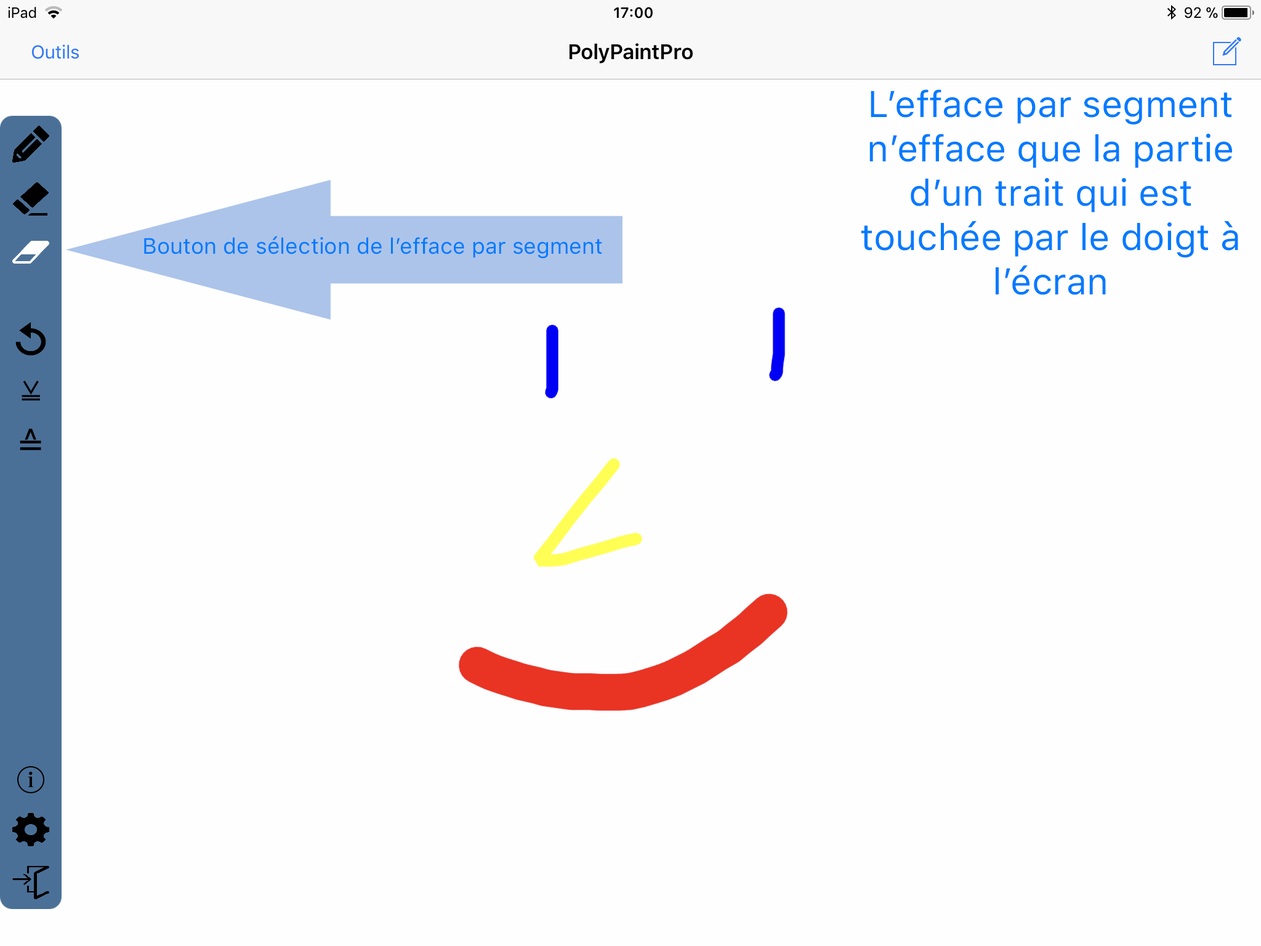
<style>
.page{position:relative;width:1261px;height:946px;background:#fffeff}
.page>*{position:absolute;margin:0}
.t1{font:36.9px "SFProText-Regular";color:#007aff}
.t2{font:22.2px "SFProText-Regular";color:#007aff}
</style>
<div class="page">
<p class="t1" style="left:861px;top:89px;width:377px;height:206px;text-align:center">L’efface par segment n’efface que la partie d’un trait qui est touchée par le doigt à l’écran</p>
<p class="t2" style="left:144px;top:236px;width:458px;height:23px">Bouton de sélection de l’efface par segment</p>
</div>
